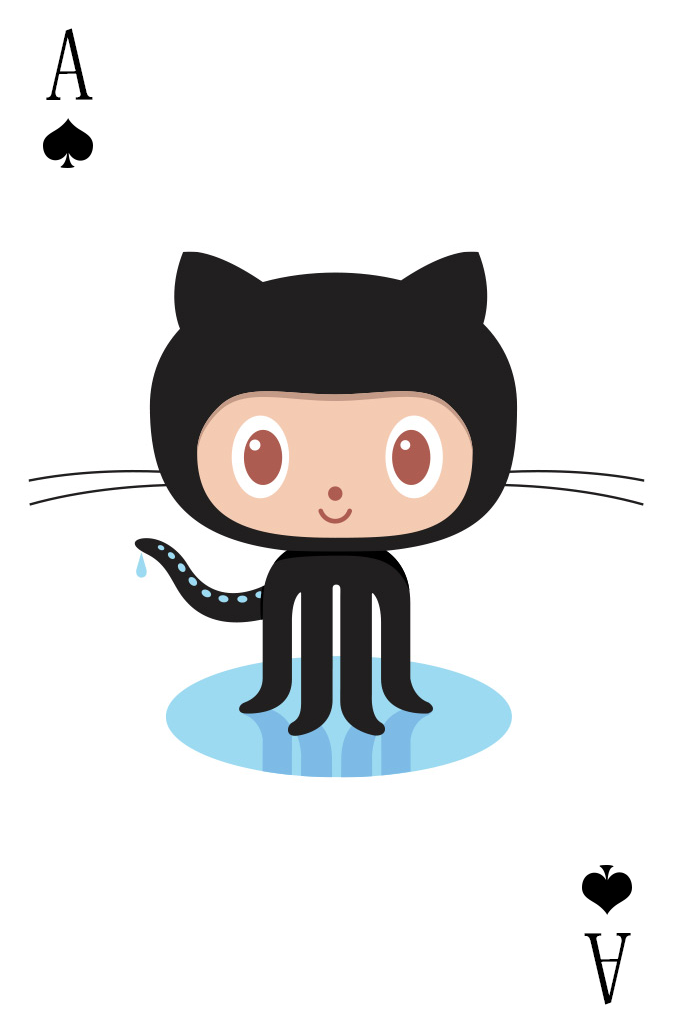
<style>
.page{position:relative;width:673px;height:1028px;background:#ffffff}
.page>*{position:absolute;margin:0}
.t1{font:104.2px "SimSun-ExtB";color:#010101;scale:0.93 1}
</style>
<div class="page">
<p class="t1" style="left:46px;top:28px;width:47px;height:72px">A</p>
<p class="t1" style="left:584px;top:933px;width:47px;height:72px;rotate:180deg">A</p>
</div>
